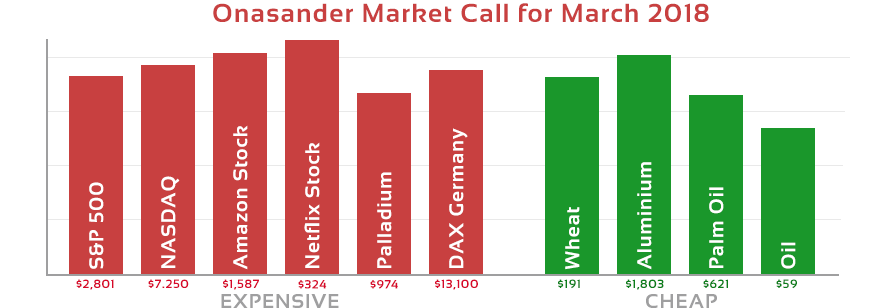
<style>
.page{position:relative;width:876px;height:308px;background:#ffffff}
.page>*{position:absolute;margin:0}
.t1{font:26px "Sansation-Bold";letter-spacing:0.05em;color:#c84040}
.t2{font:20px "Sansation-Bold";letter-spacing:0.05em;color:#ffffff}
.t3{font:12px "Sansation-Bold";letter-spacing:0.05em;color:#d7082a}
.t4{font:12px "Sansation-Bold";letter-spacing:0.05em;color:#0a7e1a}
.t5{font:20px "Sansation-Bold";letter-spacing:0.05em;color:#9f9fa0}
</style>
<div class="page">
<p class="t1" style="left:213px;top:3px;width:496px;height:19px">Onasander Market Call for March 2018</p>
<p class="t2" style="left:233px;top:125px;width:15px;height:145px;rotate:-90deg">Amazon Stock</p>
<p class="t2" style="left:449px;top:128px;width:19px;height:140px;rotate:-90deg">DAX Germany</p>
<p class="t2" style="left:304px;top:142px;width:16px;height:126px;rotate:-90deg">Netflix Stock</p>
<p class="t2" style="left:377px;top:172px;width:15px;height:96px;rotate:-90deg">Palladium</p>
<p class="t2" style="left:637px;top:162px;width:15px;height:108px;rotate:-90deg">Aluminium</p>
<p class="t2" style="left:89px;top:182px;width:15px;height:87px;rotate:-90deg">S&amp;P 500</p>
<p class="t2" style="left:161px;top:176px;width:19px;height:92px;rotate:-90deg">NASDAQ</p>
<p class="t2" style="left:709px;top:187px;width:15px;height:81px;rotate:-90deg">Palm Oil</p>
<p class="t2" style="left:565px;top:207px;width:15px;height:63px;rotate:-90deg">Wheat</p>
<p class="t2" style="left:781px;top:242px;width:15px;height:27px;rotate:-90deg">Oil</p>
<p class="t3" style="left:76px;top:279px;width:38px;height:11px">$2,801</p>
<p class="t3" style="left:148px;top:279px;width:41px;height:9px">$7.250</p>
<p class="t3" style="left:223px;top:279px;width:36px;height:11px">$1,587</p>
<p class="t3" style="left:298px;top:280px;width:29px;height:9px">$324</p>
<p class="t3" style="left:370px;top:280px;width:28px;height:9px">$974</p>
<p class="t3" style="left:435px;top:279px;width:43px;height:11px">$13,100</p>
<p class="t4" style="left:558px;top:279px;width:22px;height:10px">$191</p>
<p class="t4" style="left:626px;top:279px;width:38px;height:11px">$1,803</p>
<p class="t4" style="left:703px;top:279px;width:25px;height:9px">$621</p>
<p class="t4" style="left:776px;top:279px;width:21px;height:10px">$59</p>
<p class="t5" style="left:221px;top:294px;width:118px;height:14px">EXPENSIVE</p>
<p class="t5" style="left:646px;top:294px;width:71px;height:14px">CHEAP</p>
</div>
